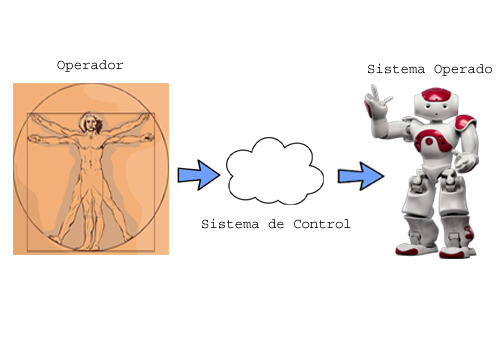
<style>
.page{position:relative;width:504px;height:360px;background:#ffffff}
.page>*{position:absolute;margin:0}
.t1{font:13.9px "Courier";color:#000000}
</style>
<div class="page">
<p class="t1" style="left:57px;top:60px;width:67px;height:12px">Operador</p>
<p class="t1" style="left:368px;top:63px;width:124px;height:13px">Sistema Operado</p>
<p class="t1" style="left:202px;top:218px;width:149px;height:11px">Sistema de Control</p>
</div>
